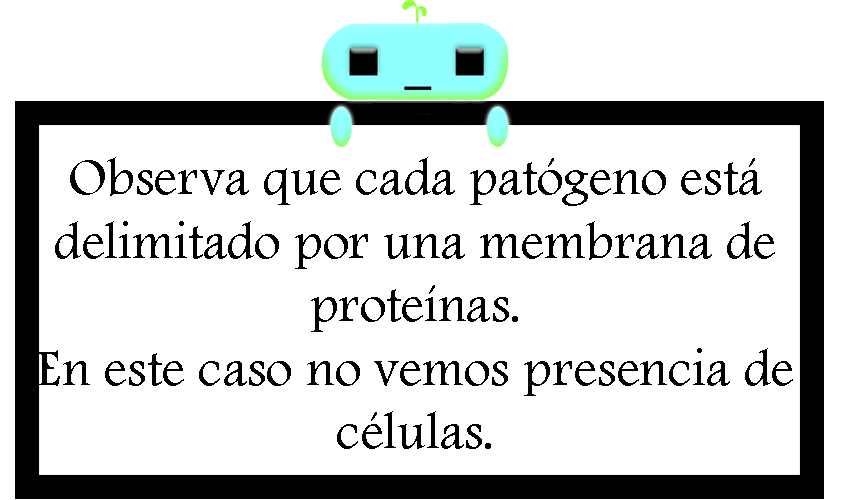
<style>
.page{position:relative;width:842px;height:500px;background:#ffffff}
.page>*{position:absolute;margin:0}
.t1{font:52.9px "FootlightMTLight";color:#000000}
</style>
<div class="page">
<p class="t1" style="left:38px;top:157px;width:755px;height:292px;text-align:center">Observa que cada patógeno está <br>delimitado por una membrana de <br>proteínas.<br>En este caso no vemos presencia de <br>células.</p>
</div>
